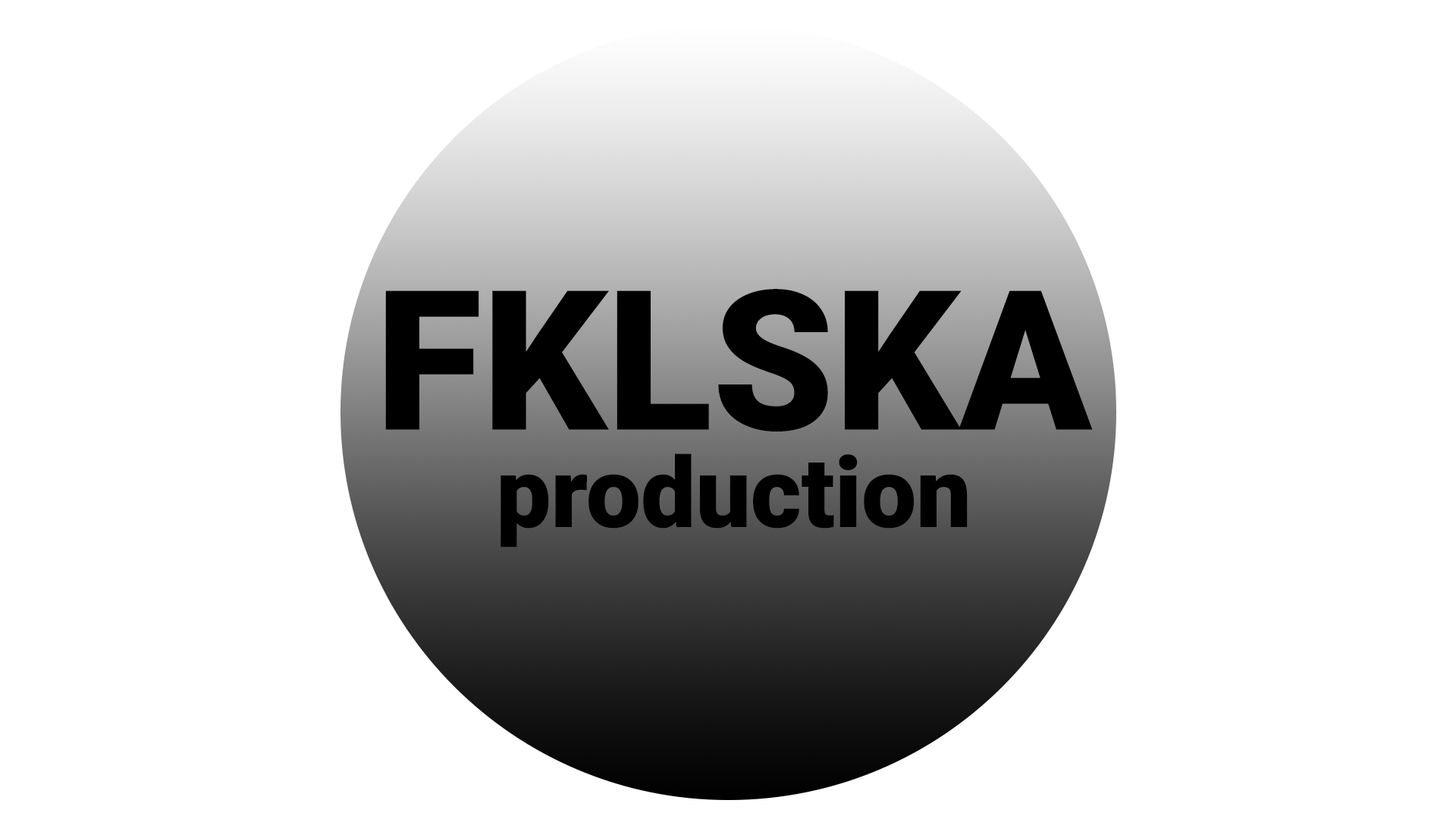
<style>
.page{position:relative;width:1456px;height:819px;background:#ffffff}
.page>*{position:absolute;margin:0}
.t1{font:97.5px/48.7px "Roboto-Black";color:#000000}
.t2{font:194.9px/48.7px "Roboto-Black";color:#000000}
</style>
<div class="page">
<p class="t1" style="left:385px;top:289px;width:708px;height:259px;text-align:center"><span class="t2">FKLSKA<br><br></span>production</p>
</div>
